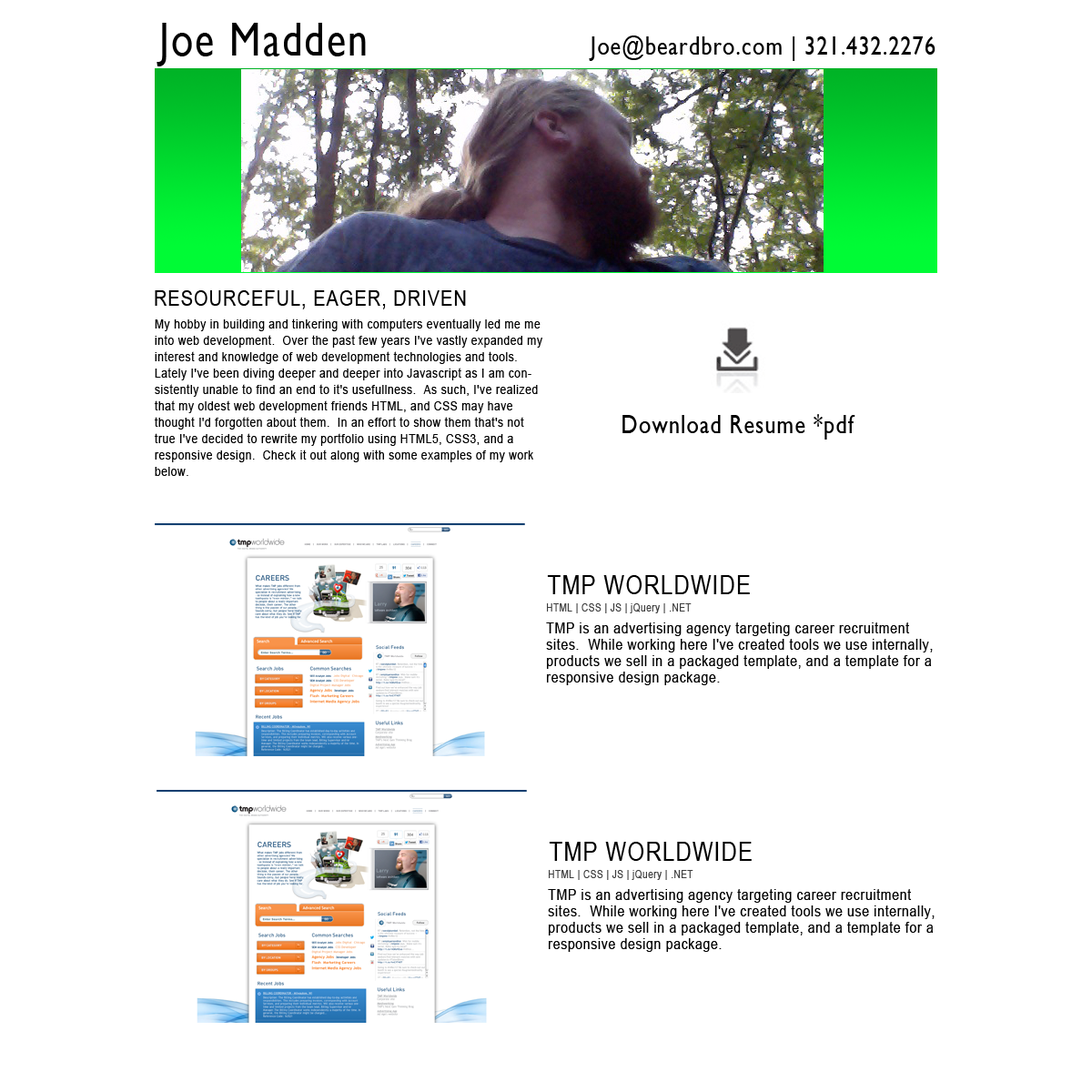
<style>
.page{position:relative;width:1092px;height:1092px;background:#ffffff}
.page>*{position:absolute;margin:0}
.t1{font:48px "GillSans";letter-spacing:0.05em;color:#000000;scale:0.83 1}
.t2{font:26.2px "GillSans";letter-spacing:0.05em;color:#000000;scale:0.83 1}
.t3{font:21.8px "ArialMT";letter-spacing:0.05em;color:#000000;scale:0.83 1}
.t4{font:13.1px/16.4px "ArialMT";letter-spacing:0.05em;color:#000000;scale:0.83 1}
.t5{font:26.2px "ArialMT";letter-spacing:0.05em;color:#000000;scale:0.83 1}
.t6{font:10.9px "ArialMT";letter-spacing:0.05em;color:#3e3e3e;scale:0.83 1}
.t7{font:15.3px/16.4px "ArialMT";letter-spacing:0.05em;color:#000000;scale:0.83 1}
</style>
<div class="page">
<p class="t1" style="left:157px;top:23px;width:209px;height:43px">Joe Madden</p>
<p class="t2" style="left:589px;top:35px;width:346px;height:26px">Joe@beardbro.com | 321.432.2276</p>
<p class="t3" style="left:155px;top:290px;width:311px;height:19px">RESOURCEFUL, EAGER, DRIVEN</p>
<p class="t4" style="left:155px;top:318px;width:387px;height:158px">My hobby in building and tinkering with computers eventually led me me into web development.  Over the past few years I've vastly expanded my interest and knowledge of web development technologies and tools.  Lately I've been diving deeper and deeper into Javascript as I am consistently unable to find an end to it's usefullness.  As such, I've realized that my oldest web development friends HTML, and CSS may have thought I'd forgotten about them.  In an effort to show them that's not true I've decided to rewrite my portfolio using HTML5, CSS3, and a responsive design.  Check it out along with some examples of my work below.</p>
<p class="t2" style="left:622px;top:414px;width:233px;height:26px">Download Resume *pdf</p>
<p class="t5" style="left:547px;top:575px;width:203px;height:19px">TMP WORLDWIDE</p>
<p class="t6" style="left:547px;top:603px;width:145px;height:10px">HTML | CSS | JS | jQuery | .NET</p>
<p class="t7" style="left:546px;top:622px;width:387px;height:63px">TMP is an advertising agency targeting career recruitment sites.  While working here I've created tools we use internally, products we sell in a packaged template, and a template for a responsive design package.</p>
<p class="t5" style="left:549px;top:842px;width:203px;height:19px">TMP WORLDWIDE</p>
<p class="t6" style="left:549px;top:870px;width:144px;height:10px">HTML | CSS | JS | jQuery | .NET</p>
<p class="t7" style="left:548px;top:889px;width:387px;height:63px">TMP is an advertising agency targeting career recruitment sites.  While working here I've created tools we use internally, products we sell in a packaged template, and a template for a responsive design package.</p>
</div>
